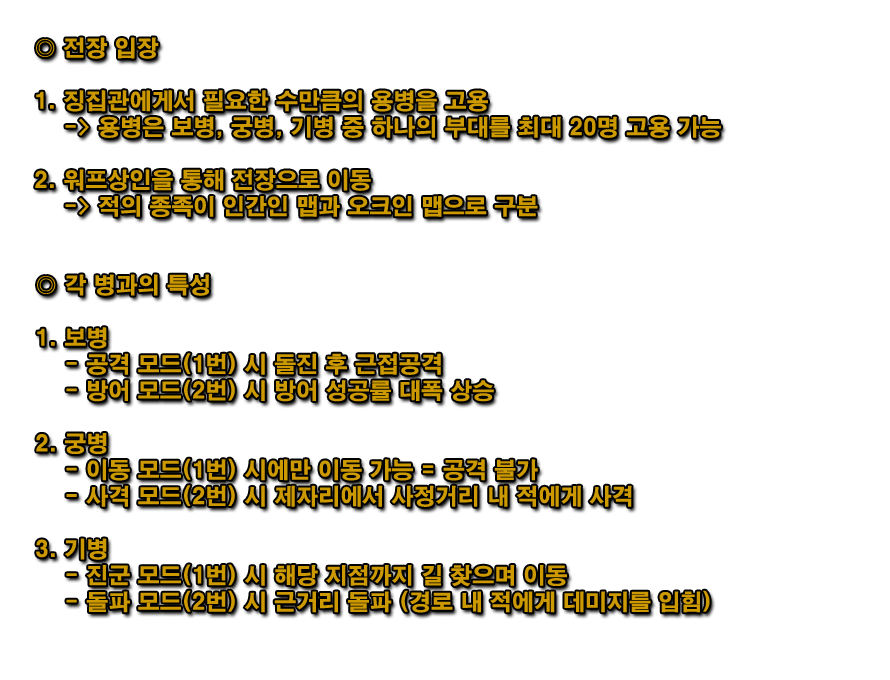
<style>
.page{position:relative;width:890px;height:680px;background:#ffffff}
.page>*{position:absolute;margin:0}
.t1{font:22px "H2gtrE";color:#cc9900}
</style>
<div class="page">
<p class="t1" style="left:35px;top:37px;width:686px;height:180px">◎ 전장 입장<br><br>1. 징집관에게서 필요한 수만큼의 용병을 고용<br>    -&gt; 용병은 보병, 궁병, 기병 중 하나의 부대를 최대 20명 고용 가능<br><br>2. 워프상인을 통해 전장으로 이동<br>    -&gt; 적의 종족이 인간인 맵과 오크인 맵으로 구분</p>
<p class="t1" style="left:36px;top:274px;width:674px;height:339px">◎ 각 병과의 특성<br><br>1. 보병<br>    - 공격 모드(1번) 시 돌진 후 근접공격<br>    - 방어 모드(2번) 시 방어 성공률 대폭 상승<br><br>2. 궁병<br>    - 이동 모드(1번) 시에만 이동 가능 = 공격 불가<br>    - 사격 모드(2번) 시 제자리에서 사정거리 내 적에게 사격<br><br>3. 기병<br>    - 진군 모드(1번) 시 해당 지점까지 길 찾으며 이동<br>    - 돌파 모드(2번) 시 근거리 돌파 (경로 내 적에게 데미지를 입힘)</p>
</div>
